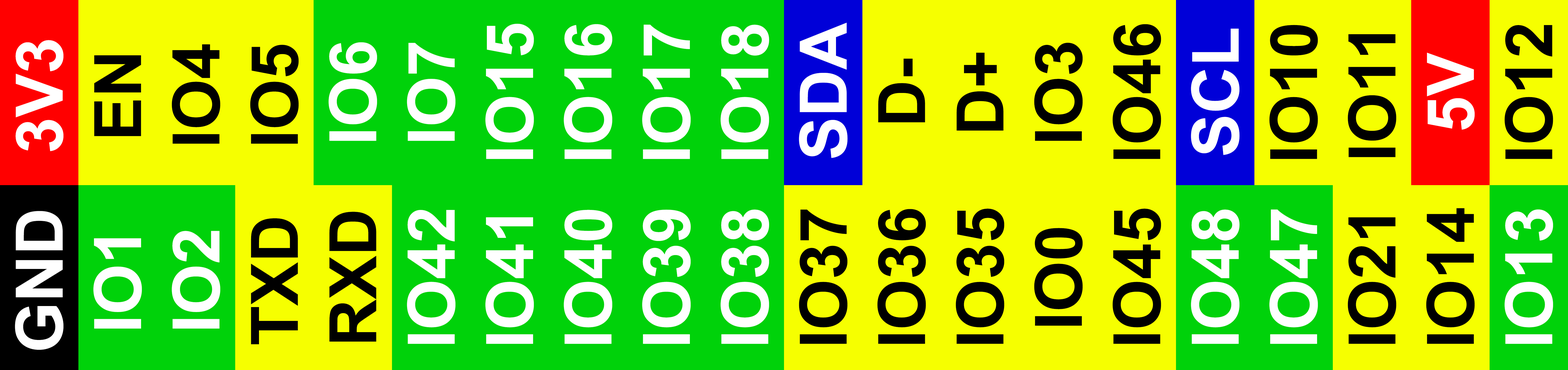
<style>
.page{position:relative;width:1568px;height:370px;background:#f6ff00}
.page>*{position:absolute;margin:0}
.t1{font:65.3px "Arial-BoldMT";color:#ffffff}
.t2{font:65.3px "Arial-BoldMT";color:#000000}
</style>
<div class="page">
<p class="t1" style="left:485px;top:24px;width:49px;height:135px;rotate:-90deg">IO15</p>
<p class="t1" style="left:564px;top:24px;width:48px;height:135px;rotate:-90deg">IO16</p>
<p class="t1" style="left:642px;top:25px;width:49px;height:134px;rotate:-90deg">IO17</p>
<p class="t1" style="left:720px;top:25px;width:49px;height:134px;rotate:-90deg">IO18</p>
<p class="t1" style="left:799px;top:23px;width:49px;height:135px;rotate:-90deg">SDA</p>
<p class="t2" style="left:1112px;top:24px;width:49px;height:135px;rotate:-90deg">IO46</p>
<p class="t1" style="left:1191px;top:28px;width:49px;height:127px;rotate:-90deg">SCL</p>
<p class="t2" style="left:1269px;top:25px;width:49px;height:134px;rotate:-90deg">IO10</p>
<p class="t2" style="left:1504px;top:25px;width:49px;height:134px;rotate:-90deg">IO12</p>
<p class="t1" style="left:15px;top:40px;width:49px;height:111px;rotate:-90deg">3V3</p>
<p class="t2" style="left:1348px;top:34px;width:48px;height:123px;rotate:-90deg">IO11</p>
<p class="t2" style="left:172px;top:44px;width:48px;height:100px;rotate:-90deg">IO4</p>
<p class="t2" style="left:250px;top:45px;width:49px;height:99px;rotate:-90deg">IO5</p>
<p class="t1" style="left:328px;top:42px;width:49px;height:99px;rotate:-90deg">IO6</p>
<p class="t1" style="left:407px;top:43px;width:49px;height:98px;rotate:-90deg">IO7</p>
<p class="t2" style="left:956px;top:53px;width:48px;height:78px;rotate:-90deg">D+</p>
<p class="t2" style="left:1034px;top:43px;width:49px;height:98px;rotate:-90deg">IO3</p>
<p class="t1" style="left:1427px;top:53px;width:48px;height:77px;rotate:-90deg">5V</p>
<p class="t2" style="left:94px;top:55px;width:47px;height:81px;rotate:-90deg">EN</p>
<p class="t2" style="left:878px;top:59px;width:47px;height:64px;rotate:-90deg">D-</p>
<p class="t1" style="left:564px;top:210px;width:48px;height:134px;rotate:-90deg">IO40</p>
<p class="t1" style="left:642px;top:210px;width:49px;height:134px;rotate:-90deg">IO39</p>
<p class="t1" style="left:720px;top:210px;width:49px;height:134px;rotate:-90deg">IO38</p>
<p class="t2" style="left:799px;top:210px;width:49px;height:134px;rotate:-90deg">IO37</p>
<p class="t2" style="left:877px;top:209px;width:49px;height:135px;rotate:-90deg">IO36</p>
<p class="t2" style="left:956px;top:209px;width:48px;height:135px;rotate:-90deg">IO35</p>
<p class="t2" style="left:1112px;top:209px;width:49px;height:135px;rotate:-90deg">IO45</p>
<p class="t1" style="left:1191px;top:210px;width:49px;height:134px;rotate:-90deg">IO48</p>
<p class="t1" style="left:1269px;top:210px;width:49px;height:134px;rotate:-90deg">IO47</p>
<p class="t2" style="left:1426px;top:208px;width:49px;height:136px;rotate:-90deg">IO14</p>
<p class="t1" style="left:1504px;top:210px;width:49px;height:134px;rotate:-90deg">IO13</p>
<p class="t1" style="left:15px;top:211px;width:49px;height:139px;rotate:-90deg">GND</p>
<p class="t2" style="left:251px;top:218px;width:47px;height:127px;rotate:-90deg">TXD</p>
<p class="t2" style="left:329px;top:212px;width:47px;height:130px;rotate:-90deg">RXD</p>
<p class="t1" style="left:407px;top:210px;width:49px;height:134px;rotate:-90deg">IO42</p>
<p class="t1" style="left:485px;top:217px;width:49px;height:127px;rotate:-90deg">IO41</p>
<p class="t2" style="left:1348px;top:217px;width:48px;height:127px;rotate:-90deg">IO21</p>
<p class="t1" style="left:172px;top:231px;width:48px;height:98px;rotate:-90deg">IO2</p>
<p class="t2" style="left:1034px;top:228px;width:49px;height:98px;rotate:-90deg">IO0</p>
<p class="t1" style="left:93px;top:238px;width:49px;height:91px;rotate:-90deg">IO1</p>
</div>
